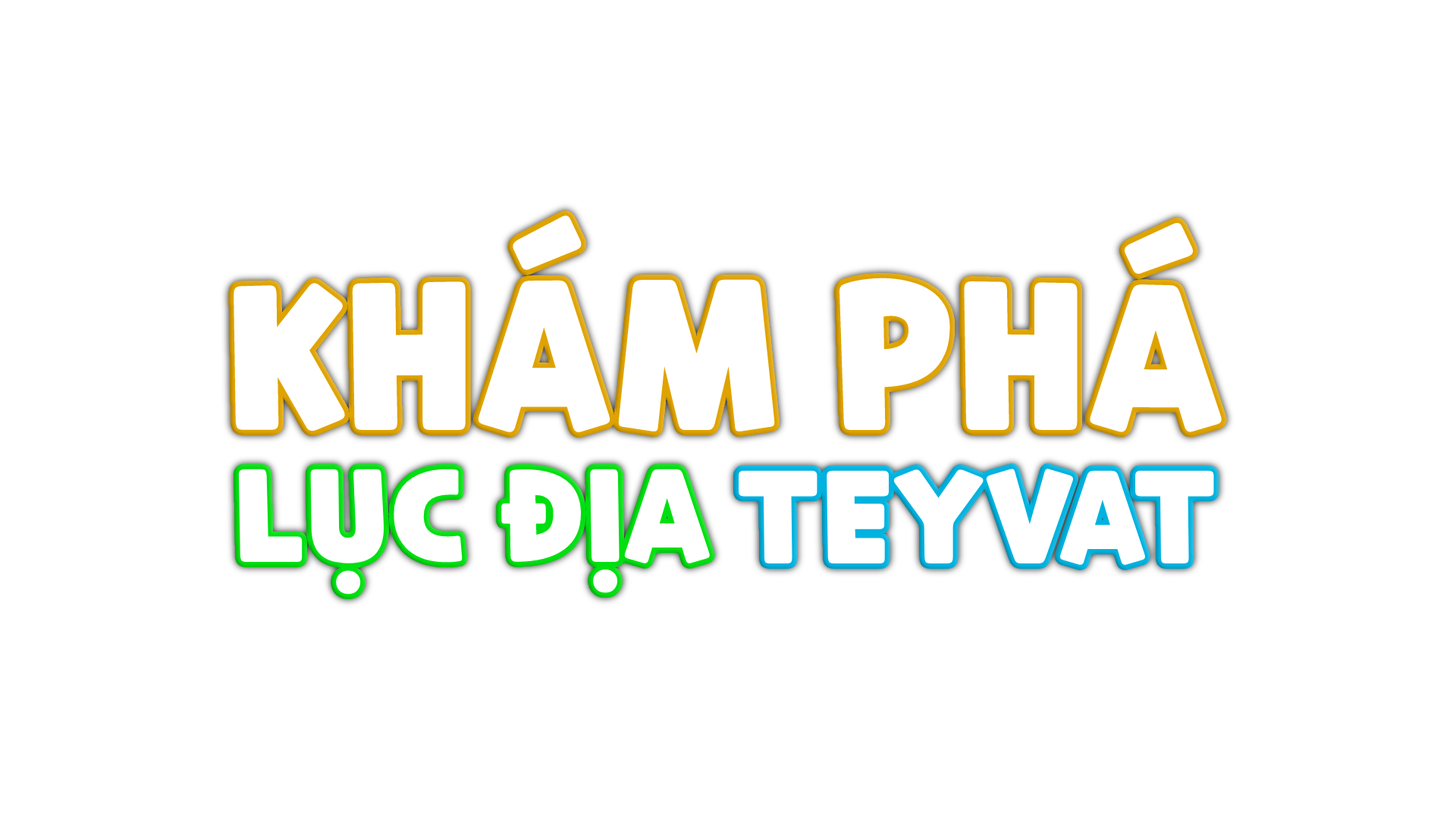
<style>
.page{position:relative;width:1456px;height:819px;background:#ffffff}
.page>*{position:absolute;margin:0}
.t1{font:194.8px "SRNCookieRun-Black";color:#ffffff}
.t2{font:126px "SRNCookieRun-Black";color:#ffffff}
</style>
<div class="page">
<p class="t1" style="left:234px;top:215px;width:988px;height:218px">KHÁM PHÁ</p>
<p class="t2" style="left:238px;top:469px;width:473px;height:126px">LỤC ĐỊA</p>
<p class="t2" style="left:739px;top:469px;width:475px;height:97px">TEYVAT</p>
</div>
